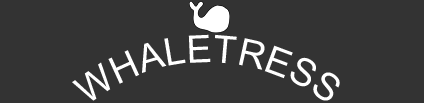
<style>
.page{position:relative;width:424px;height:103px;background:#333333}
.page>*{position:absolute;margin:0}
.t1{font:38px "ArialMT";color:#ffffff}
</style>
<div class="page">
<p class="t1" style="left:72px;top:34px;width:268px;height:67px">WHALETRESS</p>
</div>
